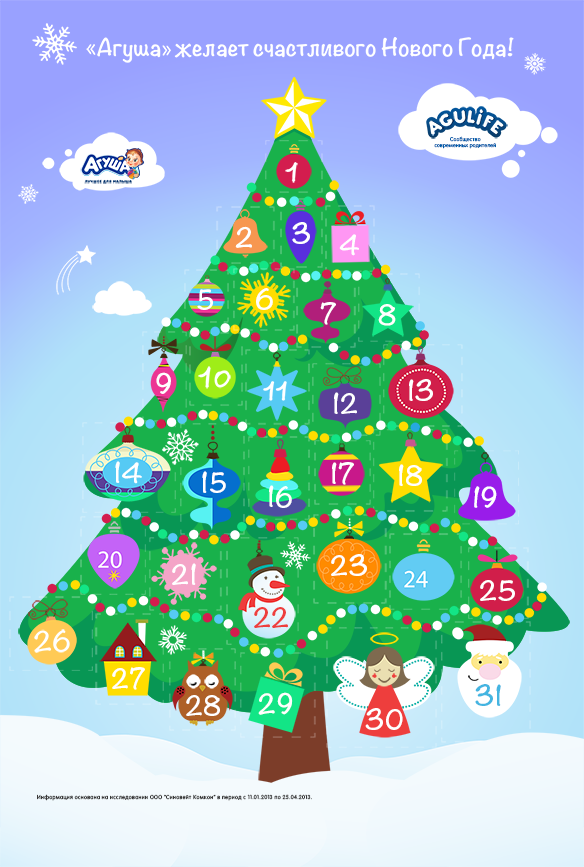
<style>
.page{position:relative;width:584px;height:867px}
.page>*{position:absolute;margin:0}
.t1{font:5.1px "NokiaSansS60";letter-spacing:0.05em;color:#005daa}
.t2{font:24.8px "Noteworthy-Bold";color:#ffffff}
.t3{font:24.8px "Noteworthy-Bold";color:#ee3e3d}
.t4{font:24.8px "Noteworthy-Bold";color:#44b5e1}
.t5{font:5.6px "NokiaSansS60";letter-spacing:0.05em;color:#3a3a3a}
</style>
<div class="page">
<p class="t1" style="left:434px;top:136px;width:62px;height:13px;text-align:center">Cообщество<br>современных родителей</p>
<p class="t2" style="left:292px;top:222px;width:18px;height:22px">3</p>
<p class="t2" style="left:235px;top:226px;width:17px;height:22px">2</p>
<p class="t2" style="left:339px;top:234px;width:20px;height:22px">4</p>
<p class="t2" style="left:197px;top:289px;width:16px;height:21px">5</p>
<p class="t2" style="left:256px;top:288px;width:17px;height:22px">6</p>
<p class="t2" style="left:320px;top:302px;width:16px;height:23px">7</p>
<p class="t2" style="left:378px;top:304px;width:18px;height:22px">8</p>
<p class="t2" style="left:156px;top:372px;width:15px;height:22px">9</p>
<p class="t2" style="left:409px;top:379px;width:24px;height:22px">13</p>
<p class="t2" style="left:334px;top:392px;width:23px;height:22px">12</p>
<p class="t2" style="left:115px;top:461px;width:27px;height:23px">14</p>
<p class="t2" style="left:332px;top:462px;width:22px;height:23px">17</p>
<p class="t2" style="left:202px;top:471px;width:24px;height:22px">15</p>
<p class="t2" style="left:399px;top:464px;width:23px;height:22px">18</p>
<p class="t2" style="left:269px;top:485px;width:23px;height:23px">16</p>
<p class="t2" style="left:474px;top:486px;width:23px;height:22px">19</p>
<p class="t2" style="left:331px;top:554px;width:36px;height:22px">23</p>
<p class="t2" style="left:172px;top:563px;width:24px;height:22px">21</p>
<p class="t2" style="left:480px;top:580px;width:35px;height:21px">25</p>
<p class="t3" style="left:254px;top:607px;width:34px;height:21px">22</p>
<p class="t2" style="left:112px;top:667px;width:33px;height:23px">27</p>
<p class="t4" style="left:475px;top:684px;width:26px;height:22px">31</p>
<p class="t2" style="left:186px;top:695px;width:34px;height:21px">28</p>
<p class="t2" style="left:258px;top:692px;width:35px;height:23px">29</p>
<p class="t2" style="left:365px;top:708px;width:38px;height:22px">30</p>
<p class="t5" style="left:37px;top:794px;width:275px;height:7px">Информация основана на исследовании ООО “Синовейт Комкон” в период с 11.01.2013 по 25.04.2013.</p>
</div>
